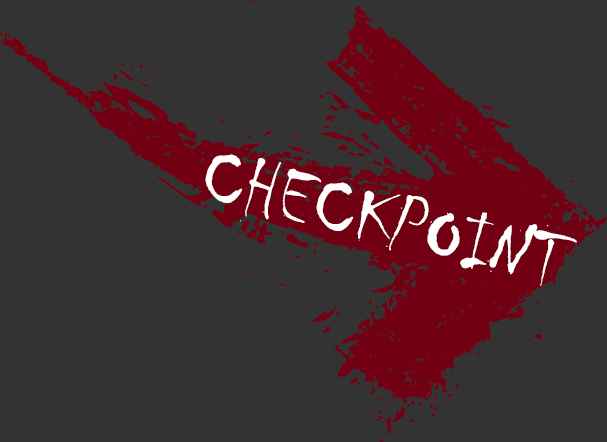
<style>
.page{position:relative;width:607px;height:442px;background:#333333}
.page>*{position:absolute;margin:0}
.t1{font:83.8px "Chiller-Regular";color:#ffffff}
</style>
<div class="page">
<p class="t1" style="left:205px;top:154px;width:372px;height:132px;rotate:14deg">CHECKPOINT</p>
</div>
